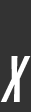
<style>
.page{position:relative;width:31px;height:112px;background:#333333}
.page>*{position:absolute;margin:0}
.t1{font:64px "BigNoodleTitling-Oblique";color:#ffffff;font-style:italic}
</style>
<div class="page">
<p class="t1" style="left:0px;top:56px;width:31px;height:46px">x</p>
</div>
